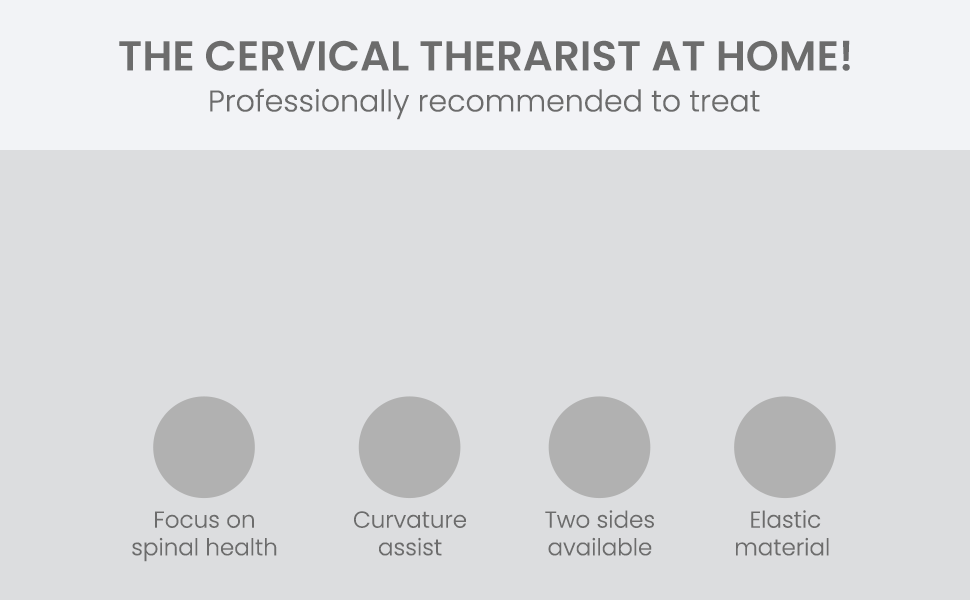
<style>
.page{position:relative;width:970px;height:600px;background:#dcdddf}
.page>*{position:absolute;margin:0}
.t1{font:42px "Poppins-SemiBold";color:#6c6c6c;text-transform:uppercase}
.t2{font:30px "Poppins-Light";color:#6c6c6c}
.t3{font:23px "Poppins-Light";color:#6c6c6c}
</style>
<div class="page">
<p class="t1" style="left:119px;top:40px;width:731px;height:31px">The cervical Therarist at Home!</p>
<p class="t2" style="left:210px;top:88px;width:550px;height:32px">Professionally recommended to treat</p>
<p class="t3" style="left:545px;top:510px;width:109px;height:46px;text-align:center">Two sides<br>available</p>
<p class="t3" style="left:736px;top:510px;width:93px;height:46px;text-align:center">Elastic<br>material</p>
<p class="t3" style="left:132px;top:511px;width:145px;height:51px;text-align:center">Focus on<br>spinal health</p>
<p class="t3" style="left:354px;top:511px;width:112px;height:45px;text-align:center">Curvature<br>assist</p>
</div>
